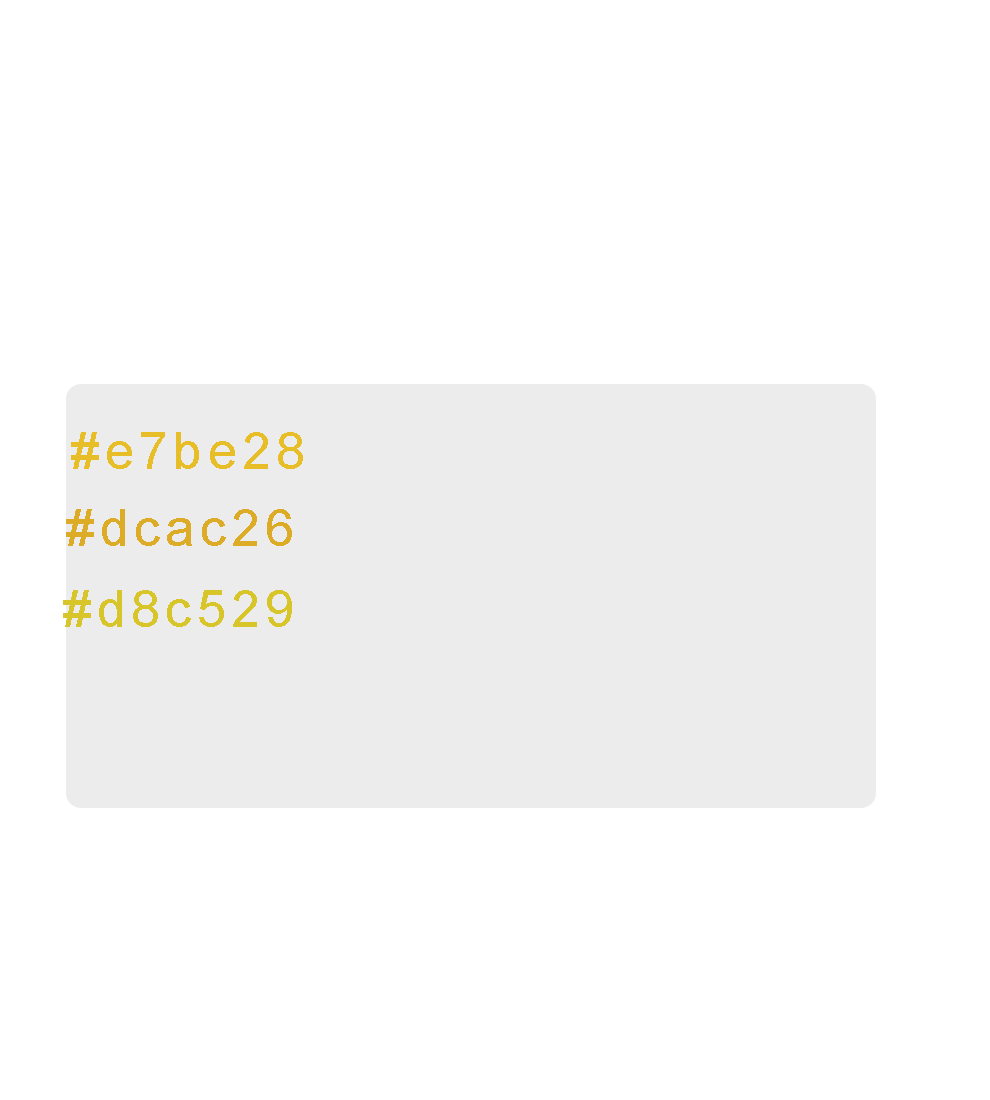
<style>
.page{position:relative;width:990px;height:1100px;background:#ffffff}
.page>*{position:absolute;margin:0}
.t1{font:52px "ArialMT";letter-spacing:0.1em;color:#e7be28}
.t2{font:52px "ArialMT";letter-spacing:0.1em;color:#dcac26}
.t3{font:52px "ArialMT";letter-spacing:0.1em;color:#d8c529}
</style>
<div class="page">
<p class="t1" style="left:71px;top:432px;width:232px;height:37px">#e7be28</p>
<p class="t2" style="left:66px;top:509px;width:226px;height:37px">#dcac26</p>
<p class="t3" style="left:63px;top:590px;width:229px;height:37px">#d8c529</p>
</div>
